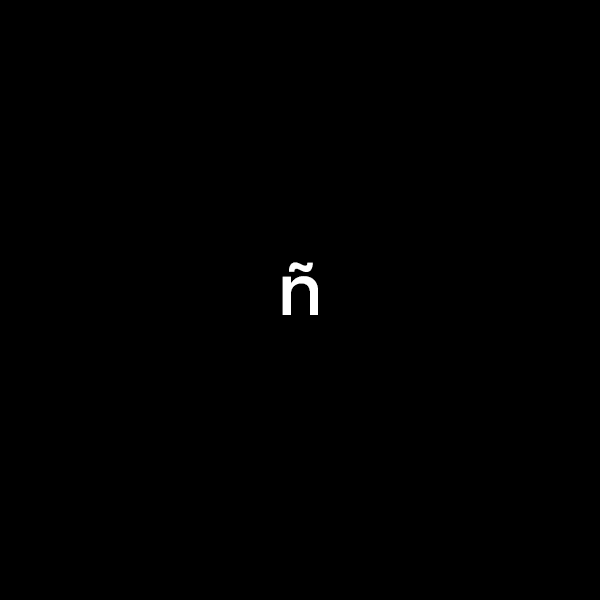
<style>
.page{position:relative;width:600px;height:600px;background:#000000}
.page>*{position:absolute;margin:0}
.t1{font:14px "Montserrat-Regular";color:#ffffff}
.t2{font:72px "Montserrat-Regular";color:#ffffff}
</style>
<div class="page">
<p class="t1" style="left:282px;top:0px;width:36px;height:315px;text-align:center">˜<br><br><br><br><br><br><br><br><br><br><br><br><br><br><span class="t2">ñ</span></p>
</div>
